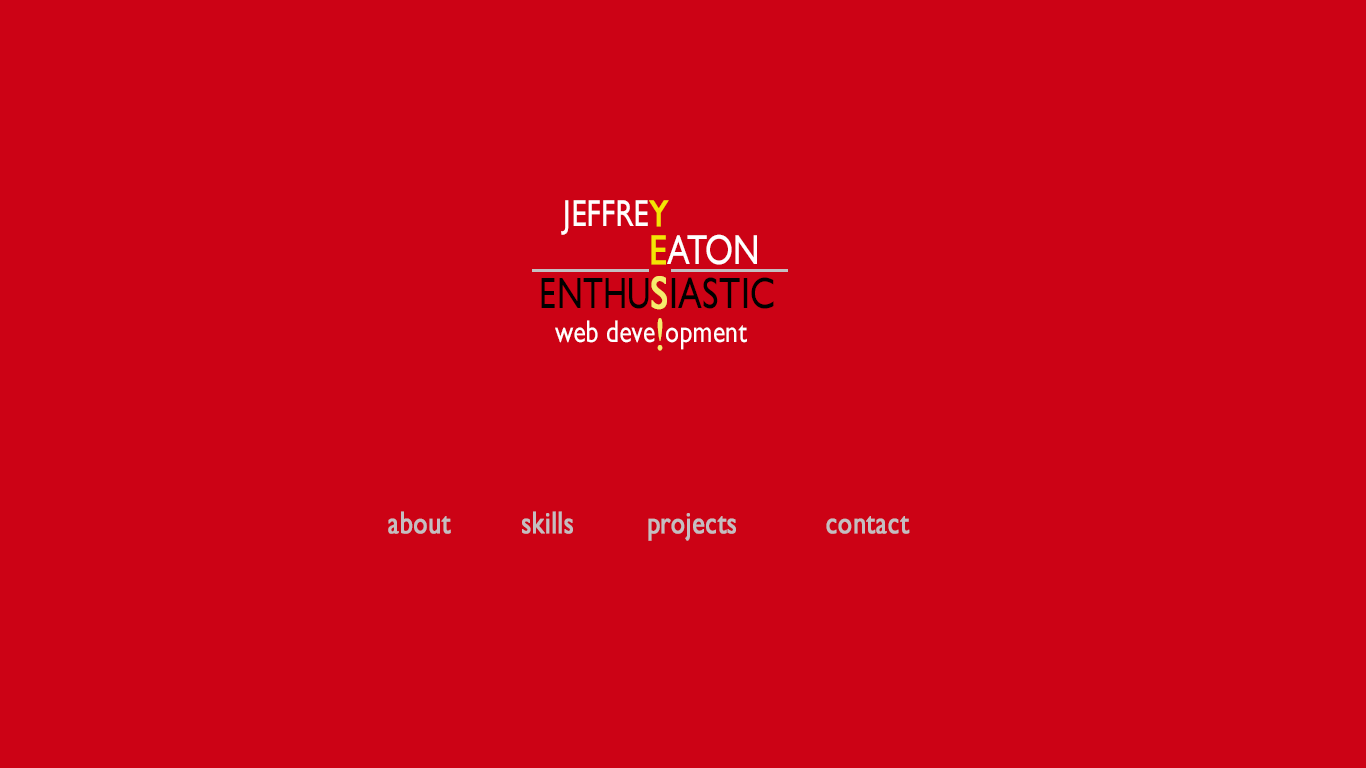
<style>
.page{position:relative;width:1366px;height:768px;background:#cc0215}
.page>*{position:absolute;margin:0}
.t1{font:37.8px "GillSansMT";letter-spacing:0.01em;color:#ffffff;scale:0.81 1}
.t2{font:37.8px "GillSansMT";letter-spacing:0.01em;color:#f3e504;font-weight:bold;scale:0.81 1}
.t3{font:42px "GillSansMT";letter-spacing:0.01em;color:#ffffff;scale:0.81 1}
.t4{font:42px "GillSansMT";letter-spacing:0.01em;color:#f3e504;font-weight:bold;scale:0.81 1}
.t5{font:44.1px "GillSansMT";letter-spacing:0.01em;color:#000000;scale:0.81 1}
.t6{font:44.1px "GillSansMT";letter-spacing:0.005em;color:#000000;scale:0.75 1}
.t7{font:46.2px "GillSansMT";letter-spacing:0.01em;color:#f6ec6d;font-weight:bold;scale:0.81 1}
.t8{font:46.2px "GillSansMT";letter-spacing:0.01em;color:#f6ec6d;scale:0.81 1}
.t9{font:31.5px "GillSansMT";letter-spacing:0.01em;color:#ffffff;scale:0.81 1}
.t10{font:31.5px "GillSansMT";letter-spacing:0.01em;color:#c4bec1;font-weight:bold;scale:0.81 1}
</style>
<div class="page">
<p class="t1" style="left:561px;top:200px;width:108px;height:35px">JEFFRE<span class="t2">Y</span></p>
<p class="t3" style="left:651px;top:234px;width:106px;height:31px"><span class="t4">E</span>ATON</p>
<p class="t5" style="left:541px;top:276px;width:233px;height:34px"><span class="t6">ENTHU</span><span class="t7">S</span>IASTIC</p>
<p class="t8" style="left:657px;top:318px;width:6px;height:33px">!</p>
<p class="t9" style="left:555px;top:320px;width:100px;height:23px">web deve</p>
<p class="t9" style="left:666px;top:325px;width:81px;height:25px">opment</p>
<p class="t10" style="left:388px;top:511px;width:63px;height:23px">about</p>
<p class="t10" style="left:522px;top:511px;width:51px;height:23px">skills</p>
<p class="t10" style="left:648px;top:513px;width:88px;height:28px">projects</p>
<p class="t10" style="left:826px;top:516px;width:84px;height:18px">contact</p>
</div>
